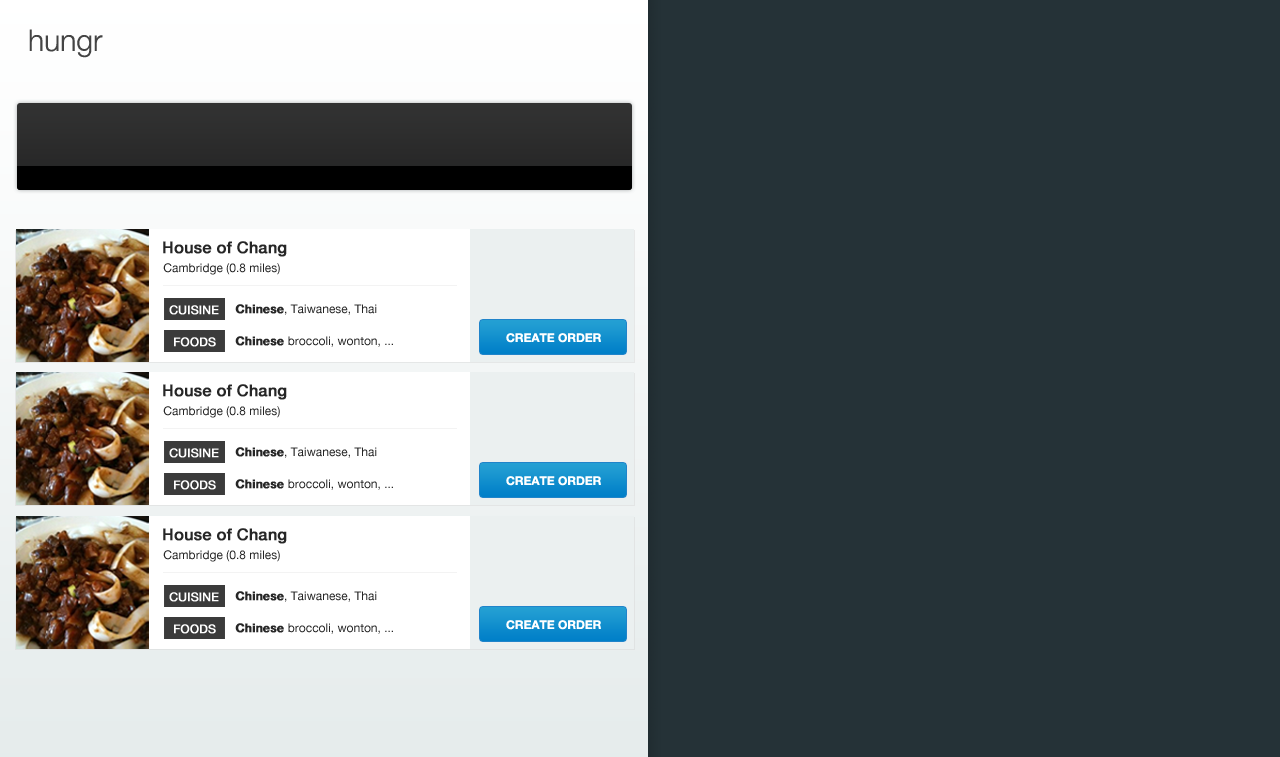
<style>
.page{position:relative;width:1280px;height:757px;background:#253237}
.page>*{position:absolute;margin:0}
.t1{font:30px "HelveticaNeue-Light";color:#444444}
.t2{font:16px "HelveticaNeue-Medium";color:#262626;font-weight:bold}
.t3{font:12px "HelveticaNeue";color:#262626}
.t4{font:12px "HelveticaNeue";color:#ffffff;font-weight:bold}
.t5{font:12px "HelveticaNeue";color:#ff1573;font-weight:bold}
.t6{font:12px "HelveticaNeue-Bold";color:#262626;font-weight:bold}
.t7{font:12px "HelveticaNeue-Bold";color:#ffffff}
</style>
<div class="page">
<p class="t1" style="left:29px;top:29px;width:74px;height:29px">hungr</p>
<p class="t2" style="left:163px;top:241px;width:124px;height:16px">House of Chang</p>
<p class="t3" style="left:163px;top:263px;width:117px;height:12px">Cambridge (0.8 miles)</p>
<p class="t4" style="left:169px;top:305px;width:50px;height:10px">CUISINE</p>
<p class="t3" style="left:235px;top:304px;width:142px;height:11px"><span class="t5">   </span><span class="t6">Chinese</span>, Taiwanese, Thai</p>
<p class="t4" style="left:174px;top:337px;width:42px;height:10px">FOODS</p>
<p class="t3" style="left:235px;top:336px;width:158px;height:11px"><span class="t5">   </span><span class="t6">Chinese </span>broccoli, wonton, ...</p>
<p class="t7" style="left:506px;top:333px;width:95px;height:10px">CREATE ORDER</p>
<p class="t2" style="left:163px;top:384px;width:124px;height:16px">House of Chang</p>
<p class="t3" style="left:163px;top:406px;width:117px;height:12px">Cambridge (0.8 miles)</p>
<p class="t4" style="left:169px;top:448px;width:50px;height:10px">CUISINE</p>
<p class="t3" style="left:235px;top:447px;width:142px;height:11px"><span class="t5">   </span><span class="t6">Chinese</span>, Taiwanese, Thai</p>
<p class="t4" style="left:174px;top:480px;width:42px;height:10px">FOODS</p>
<p class="t3" style="left:235px;top:479px;width:158px;height:11px"><span class="t5">   </span><span class="t6">Chinese </span>broccoli, wonton, ...</p>
<p class="t7" style="left:506px;top:476px;width:95px;height:10px">CREATE ORDER</p>
<p class="t2" style="left:163px;top:528px;width:124px;height:16px">House of Chang</p>
<p class="t3" style="left:163px;top:550px;width:117px;height:12px">Cambridge (0.8 miles)</p>
<p class="t4" style="left:169px;top:592px;width:50px;height:10px">CUISINE</p>
<p class="t3" style="left:235px;top:591px;width:142px;height:11px"><span class="t5">   </span><span class="t6">Chinese</span>, Taiwanese, Thai</p>
<p class="t4" style="left:174px;top:624px;width:42px;height:10px">FOODS</p>
<p class="t3" style="left:235px;top:623px;width:158px;height:11px"><span class="t5">   </span><span class="t6">Chinese </span>broccoli, wonton, ...</p>
<p class="t7" style="left:506px;top:620px;width:95px;height:10px">CREATE ORDER</p>
</div>
